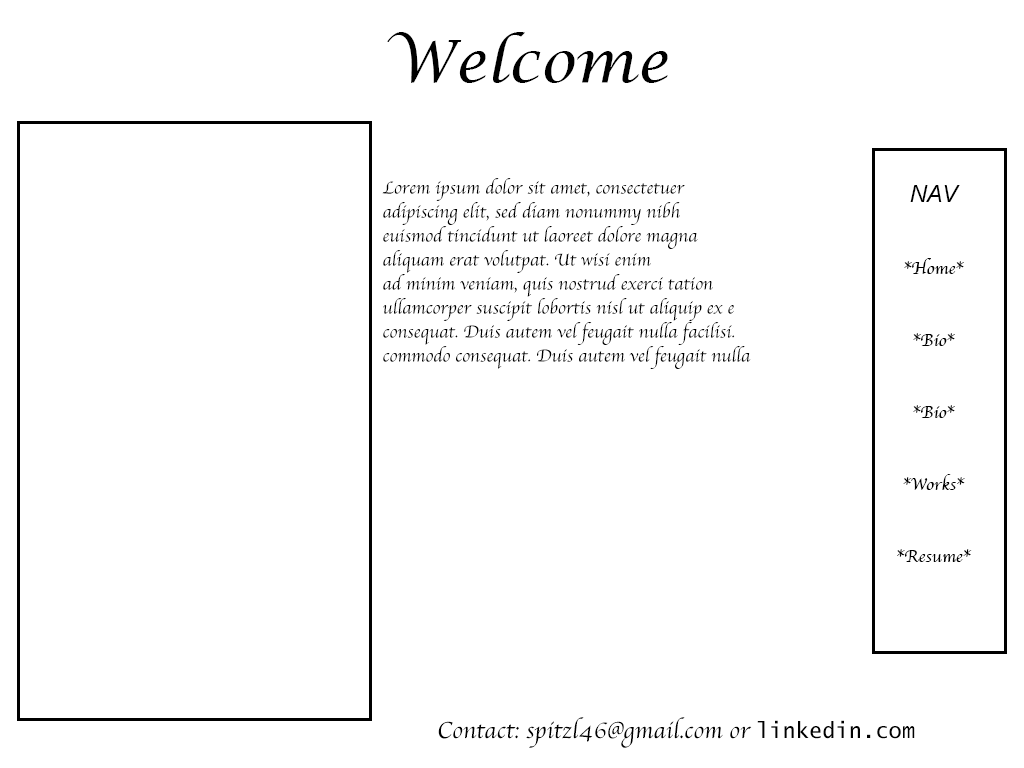
<style>
.page{position:relative;width:1024px;height:768px;background:#ffffff}
.page>*{position:absolute;margin:0}
.t1{font:60px "LucidaCalligraphy-Italic";color:#000000}
.t2{font:18px/24px "Apple-Chancery";color:#000000}
.t3{font:24px/24px "Arial-ItalicMT";color:#000000}
.t4{font:24px "Apple-Chancery";color:#000000}
.t5{font:22px "LucidaSans-Typewriter";color:#000000}
</style>
<div class="page">
<p class="t1" style="left:387px;top:32px;width:281px;height:51px">Welcome</p>
<p class="t2" style="left:382px;top:178px;width:369px;height:191px">Lorem ipsum dolor sit amet, consectetuer <br>adipiscing elit, sed diam nonummy nibh <br>euismod tincidunt ut laoreet dolore magna <br>aliquam erat volutpat. Ut wisi enim <br>ad minim veniam, quis nostrud exerci tation <br>ullamcorper suscipit lobortis nisl ut aliquip ex e<br>consequat. Duis autem vel feugait nulla facilisi. <br>commodo consequat. Duis autem vel feugait nulla</p>
<p class="t2" style="left:897px;top:185px;width:75px;height:377px;text-align:center"><span class="t3"><br>NAV<br><br></span><br>*Home*<br><br><br>*Bio*<br><br><br>*Bio*<br><br><br>*Works*<br><br><br>*Resume*</p>
<p class="t4" style="left:438px;top:717px;width:477px;height:31px">Contact: spitzl46@gmail.com or <span class="t5">linkedin.com</span></p>
</div>
